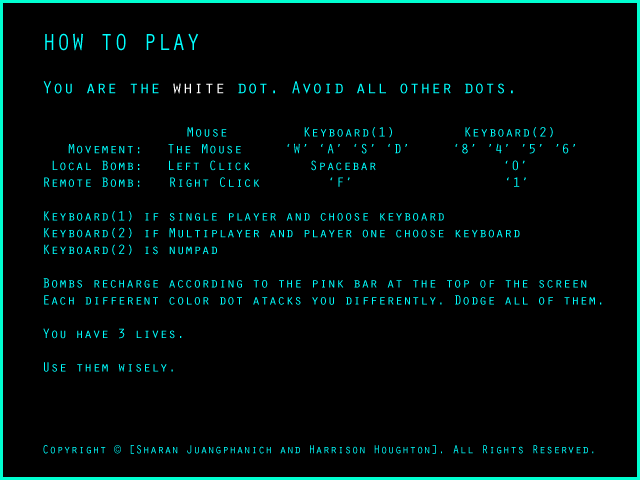
<style>
.page{position:relative;width:640px;height:480px;background:#000000}
.page>*{position:absolute;margin:0}
.t1{font:14px "OratorStd";color:#00ffff}
.t2{font:24px "OratorStd";color:#00ffff}
.t3{font:18px "OratorStd";color:#00ffff}
.t4{font:18px "OratorStd";color:#ffffff}
.t5{font:12px "OratorStd";color:#00ffff}
</style>
<div class="page">
<p class="t1" style="left:43px;top:33px;width:559px;height:421px"><span class="t2">HOW TO PLAY<br></span><span class="t3"><br>You are the </span><span class="t4">white</span><span class="t3"> dot. Avoid all other dots.<br><br>    </span>Mouse     Keyboard(1)     Keyboard(2)<br>   Movement:   The Mouse     ‘W’ ‘A’ ‘S’ ‘D’     ‘8’ ’4’ ’5’ ’6’<br> Local Bomb:   Left Click       Spacebar               ‘0’<br>Remote Bomb:   Right Click        ‘F’                  ‘1’<br><br>Keyboard(1) if single player and choose keyboard<br>Keyboard(2) if Multiplayer and player one choose keyboard<br>Keyboard(2) is numpad<br><br>Bombs recharge according to the pink bar at the top of the screen<br>Each different color dot atacks you differently. Dodge all of them.<br><br>You have 3 lives.<br><br>Use them wisely.<br><br><br><br><br><span class="t5">Copyright © [Sharan Juangphanich and Harrison Houghton]. All Rights Reserved.</span></p>
</div>
